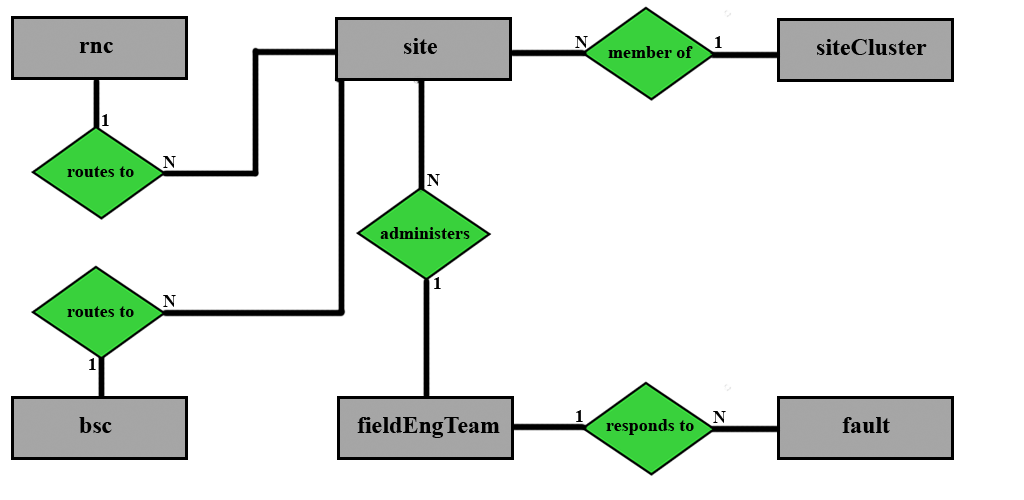
<style>
.page{position:relative;width:1024px;height:500px;background:#ffffff}
.page>*{position:absolute;margin:0}
.t1{font:24px "TimesNewRomanPS-BoldMT";color:#000000}
.t2{font:18px "TimesNewRomanPS-BoldMT";color:#000000}
</style>
<div class="page">
<p class="t1" style="left:404px;top:38px;width:33px;height:16px">site</p>
<p class="t2" style="left:575px;top:36px;width:13px;height:12px">N</p>
<p class="t2" style="left:715px;top:36px;width:7px;height:12px">1</p>
<p class="t1" style="left:817px;top:39px;width:110px;height:16px">siteCluster</p>
<p class="t1" style="left:79px;top:42px;width:34px;height:11px">rnc</p>
<p class="t2" style="left:608px;top:46px;width:85px;height:12px">member of</p>
<p class="t2" style="left:102px;top:114px;width:7px;height:12px">1</p>
<p class="t2" style="left:163px;top:156px;width:13px;height:12px">N</p>
<p class="t2" style="left:67px;top:166px;width:67px;height:11px">routes to</p>
<p class="t2" style="left:427px;top:174px;width:13px;height:12px">N</p>
<p class="t2" style="left:380px;top:227px;width:90px;height:12px">administers</p>
<p class="t2" style="left:434px;top:277px;width:7px;height:12px">1</p>
<p class="t2" style="left:163px;top:295px;width:13px;height:12px">N</p>
<p class="t2" style="left:67px;top:306px;width:67px;height:11px">routes to</p>
<p class="t2" style="left:89px;top:358px;width:7px;height:12px">1</p>
<p class="t2" style="left:576px;top:410px;width:7px;height:12px">1</p>
<p class="t2" style="left:713px;top:411px;width:13px;height:12px">N</p>
<p class="t1" style="left:79px;top:417px;width:33px;height:16px">bsc</p>
<p class="t1" style="left:357px;top:417px;width:143px;height:21px">fieldEngTeam</p>
<p class="t2" style="left:606px;top:419px;width:88px;height:16px">responds to</p>
<p class="t1" style="left:842px;top:417px;width:48px;height:16px">fault</p>
</div>
